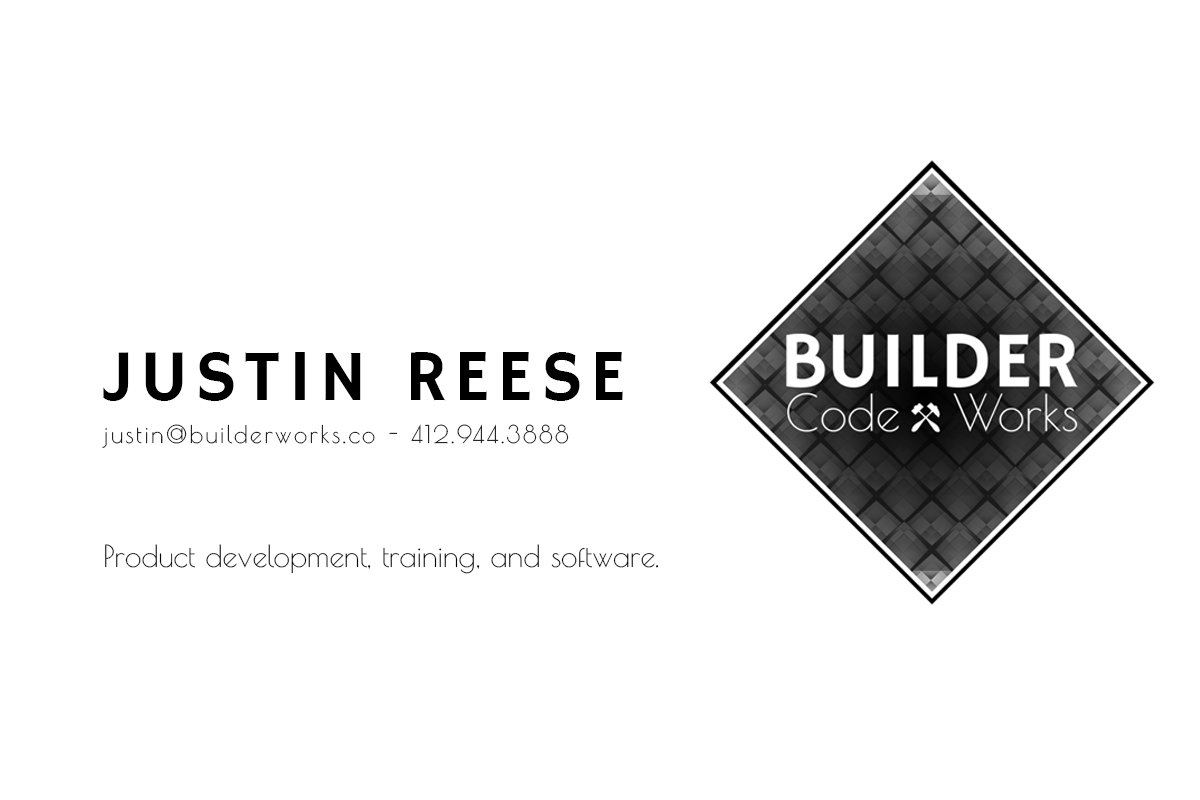
<style>
.page{position:relative;width:1200px;height:800px;background:#ffffff}
.page>*{position:absolute;margin:0}
.t1{font:72px "HammersmithOne-Regular";letter-spacing:0.1em;color:#000000}
.t2{font:24px "PoiretOne-Regular";letter-spacing:0.1em;color:#000000}
.t3{font:30px "PoiretOne-Regular";color:#000000}
</style>
<div class="page">
<p class="t1" style="left:103px;top:352px;width:520px;height:49px">JUSTIN REESE</p>
<p class="t2" style="left:102px;top:424px;width:467px;height:24px">justin@builderworks.co - 412.944.3888</p>
<p class="t3" style="left:105px;top:544px;width:554px;height:30px">Product development, training, and software.</p>
</div>
